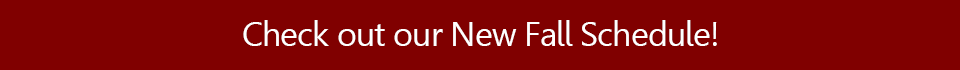
<style>
.page{position:relative;width:960px;height:70px;background:#800000}
.page>*{position:absolute;margin:0}
.t1{font:34px "Gisha";letter-spacing:-0.025em;color:#ffffff}
</style>
<div class="page">
<p class="t1" style="left:243px;top:20px;width:474px;height:26px">Check out our New Fall Schedule!</p>
</div>
